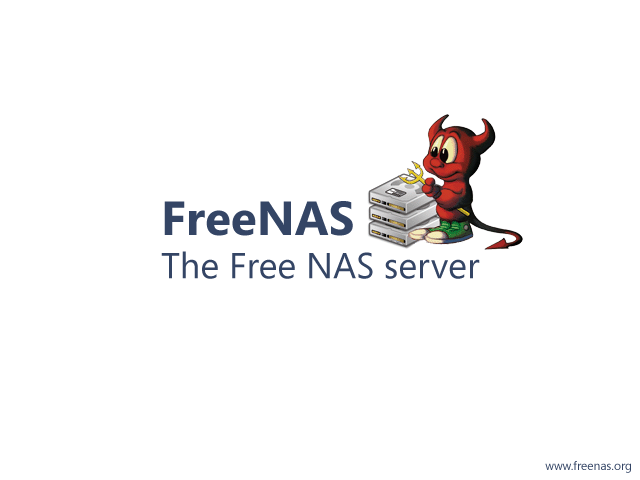
<style>
.page{position:relative;width:640px;height:480px;background:#ffffff}
.page>*{position:absolute;margin:0}
.t1{font:36px "SegoeUI-Regular";color:#344565}
.t2{font:48px "SegoeUI-Bold";color:#344565}
.t3{font:12px "SegoeUI-Regular";color:#344565}
</style>
<div class="page">
<p class="t1" style="left:161px;top:201px;width:319px;height:78px"><span class="t2">FreeNAS<br></span>The Free NAS server</p>
<p class="t3" style="left:545px;top:461px;width:86px;height:12px">www.freenas.org</p>
</div>
